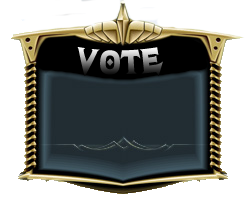
<style>
.page{position:relative;width:247px;height:199px;background:#ffffff}
.page>*{position:absolute;margin:0}
.t1{font:36px "MegadethCryptic"}
</style>
<div class="page">
<p class="t1" style="left:77px;top:47px;width:86px;height:30px">VOTE</p>
</div>
